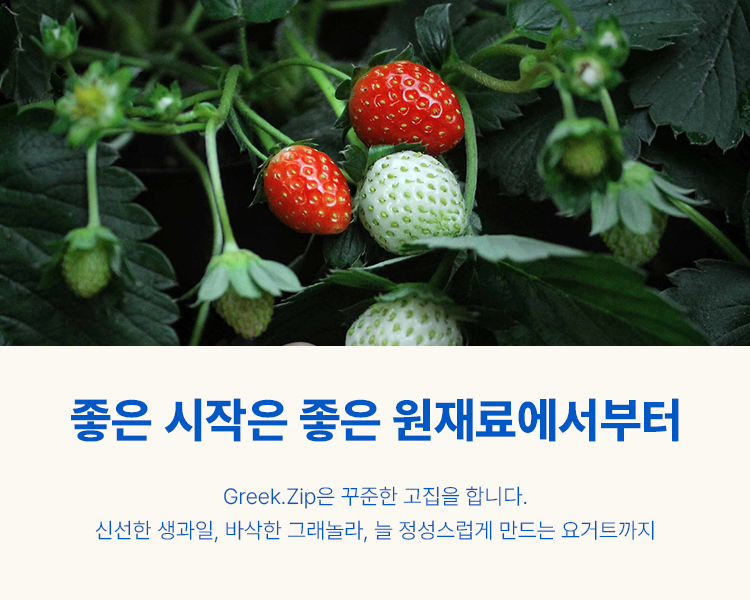
<style>
.page{position:relative;width:750px;height:600px;background:#fcf9f2}
.page>*{position:absolute;margin:0}
.t1{font:48px "Pretendard-ExtraBold";color:#0058c4}
.t2{font:22px/34px "Pretendard-Light";color:#0058c4}
</style>
<div class="page">
<p class="t1" style="left:71px;top:398px;width:608px;height:44px">좋은 시작은 좋은 원재료에서부터</p>
<p class="t2" style="left:95px;top:486px;width:559px;height:57px;text-align:center">Greek.Zip은 꾸준한 고집을 합니다.<br>신선한 생과일, 바삭한 그래놀라, 늘 정성스럽게 만드는 요거트까지</p>
</div>
